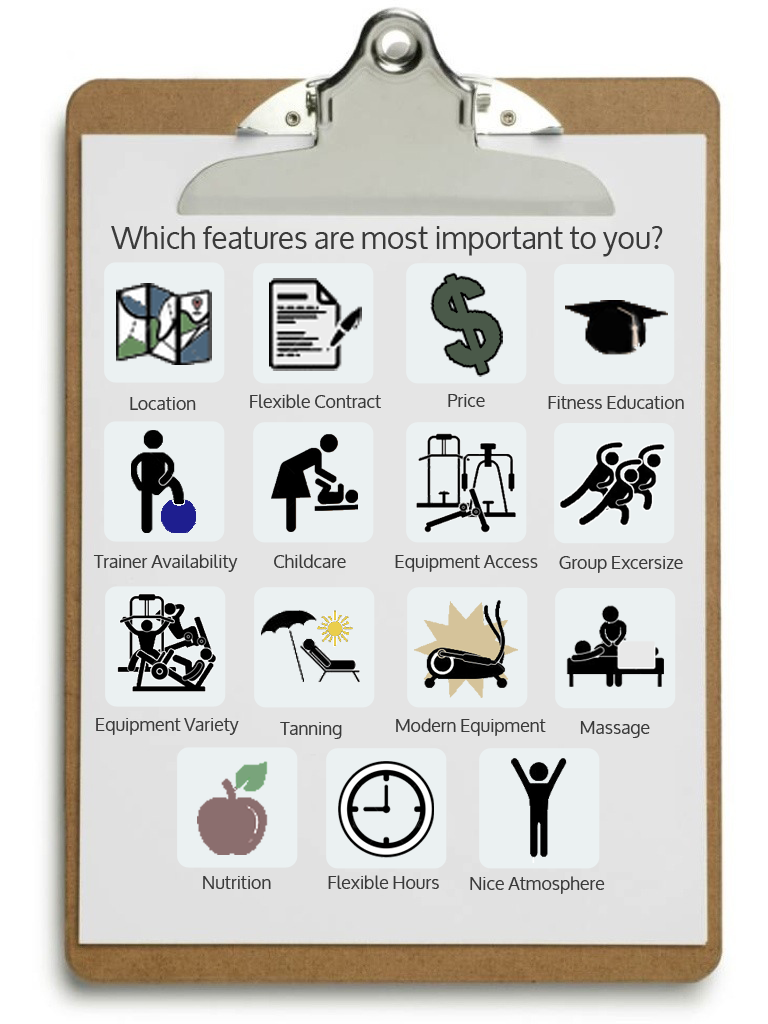
<style>
.page{position:relative;width:768px;height:1024px}
.page>*{position:absolute;margin:0}
.t1{font:30px "Oxygen";color:#3a3a3a}
.t2{font:18px "Oxygen";color:#3a3a3a}
</style>
<div class="page">
<p class="t1" style="left:111px;top:226px;width:552px;height:31px">Which features are most important to you?</p>
<p class="t2" style="left:130px;top:397px;width:66px;height:13px">Location</p>
<p class="t2" style="left:250px;top:394px;width:131px;height:14px">Flexible Contract</p>
<p class="t2" style="left:448px;top:394px;width:37px;height:13px">Price</p>
<p class="t2" style="left:548px;top:395px;width:136px;height:14px">Fitness Education</p>
<p class="t2" style="left:93px;top:554px;width:145px;height:18px">Trainer Availability</p>
<p class="t2" style="left:274px;top:554px;width:72px;height:14px">Childcare</p>
<p class="t2" style="left:395px;top:555px;width:143px;height:17px">Equipment Access</p>
<p class="t2" style="left:559px;top:556px;width:124px;height:17px">Group Excersize</p>
<p class="t2" style="left:96px;top:718px;width:143px;height:17px">Equipment Variety</p>
<p class="t2" style="left:280px;top:722px;width:62px;height:17px">Tanning</p>
<p class="t2" style="left:396px;top:718px;width:150px;height:18px">Modern Equipment</p>
<p class="t2" style="left:580px;top:721px;width:70px;height:17px">Massage</p>
<p class="t2" style="left:203px;top:876px;width:68px;height:13px">Nutrition</p>
<p class="t2" style="left:328px;top:875px;width:111px;height:14px">Flexible Hours</p>
<p class="t2" style="left:470px;top:876px;width:135px;height:18px">Nice Atmosphere</p>
</div>
